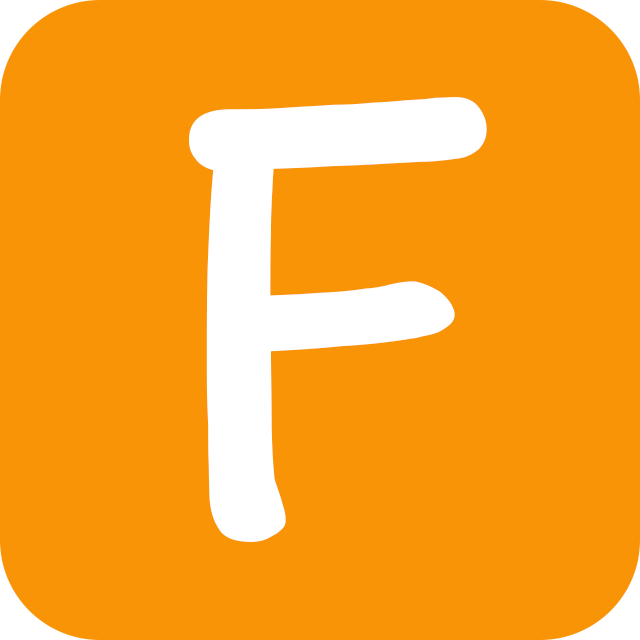
<style>
.page{position:relative;width:640px;height:640px;background:#f89406}
.page>*{position:absolute;margin:0}
.t1{font:640px "HannotateSC-W7";color:#ffffff}
</style>
<div class="page">
<p class="t1" style="left:188px;top:97px;width:299px;height:445px">F</p>
</div>
